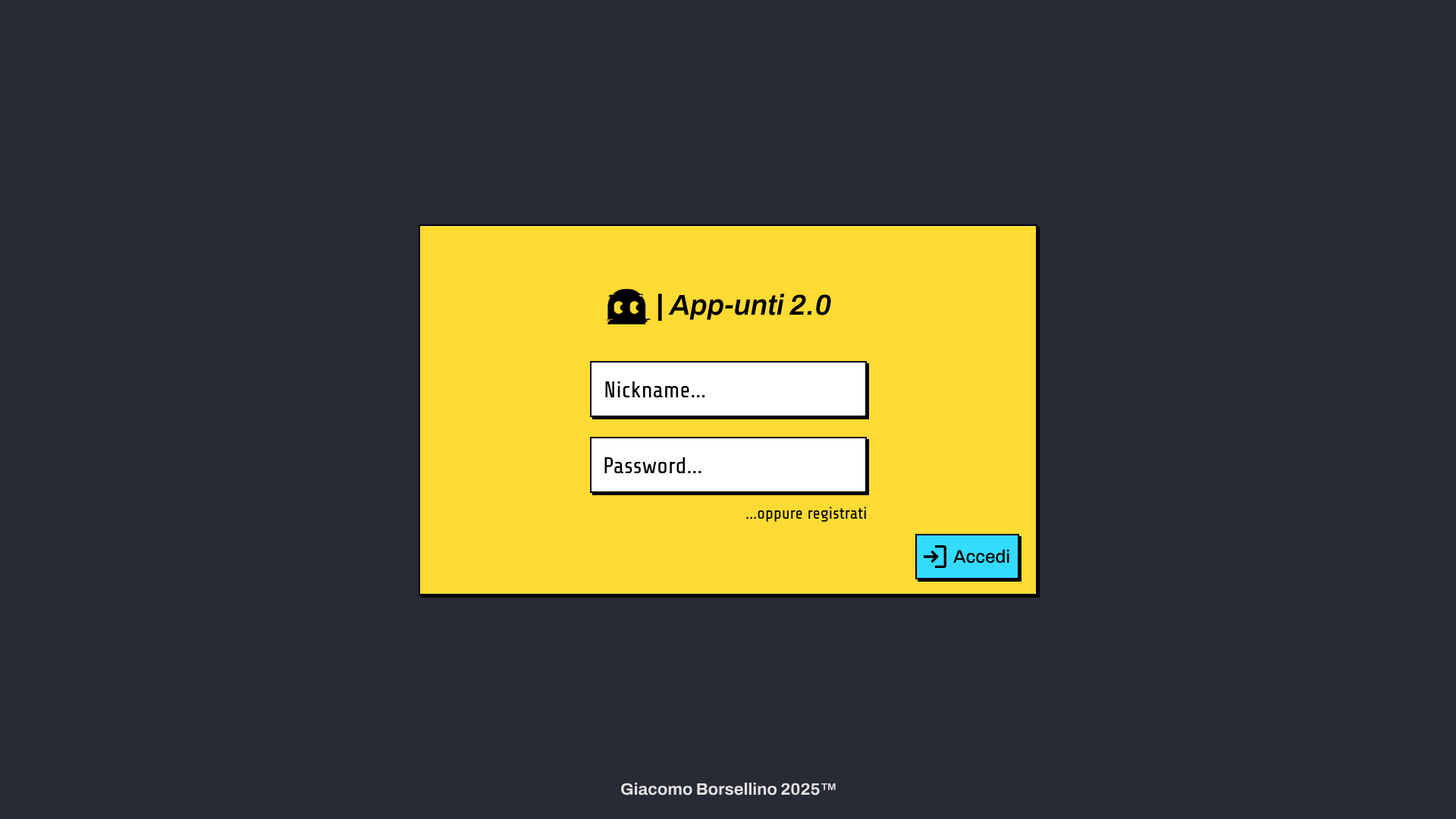
<style>
.page{position:relative;width:1456px;height:819px;background:#282a36}
.page>*{position:absolute;margin:0}
.t1{font:28.8px "Archivo-SemiBoldItalic";color:#000000}
.t2{font:28.8px "ArchivoBlack-Regular";color:#000000}
.t3{font:22.7px "Share-Tech";color:#000000}
.t4{font:16.7px "Share-Tech";color:#000000}
.t5{font:18.2px "Archivo-Medium";color:#000000}
.t6{font:16.7px "Archivo-Bold";color:#e3e3e3}
</style>
<div class="page">
<p class="t1" style="left:657px;top:293px;width:174px;height:29px"><span class="t2">| </span>App-unti 2.0</p>
<p class="t3" style="left:605px;top:381px;width:100px;height:16px">Nickname...</p>
<p class="t3" style="left:604px;top:457px;width:97px;height:16px">Password...</p>
<p class="t4" style="left:746px;top:507px;width:120px;height:15px">...oppure registrati</p>
<p class="t5" style="left:953px;top:549px;width:56px;height:14px">Accedi</p>
<p class="t6" style="left:621px;top:783px;width:215px;height:12px">Giacomo Borsellino 2025™</p>
</div>
